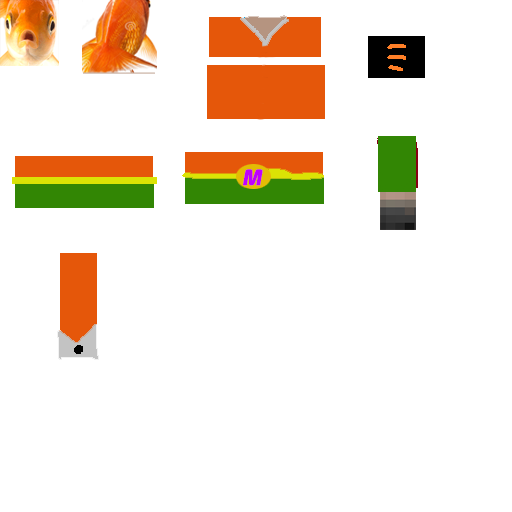
<style>
.page{position:relative;width:512px;height:512px;background:#ffffff}
.page>*{position:absolute;margin:0}
.t1{font:22px "Prototype";letter-spacing:0.24em;color:#c000ff;font-weight:bold;font-style:italic}
</style>
<div class="page">
<p class="t1" style="left:243px;top:169px;width:20px;height:17px">M</p>
</div>
